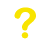
<style>
.page{position:relative;width:50px;height:50px;background:#ffffff}
.page>*{position:absolute;margin:0}
.t1{font:41.5px "ArialRoundedMTBold";color:#f8e400;scale:1.04 1}
</style>
<div class="page">
<p class="t1" style="left:14px;top:7px;width:22px;height:32px">?</p>
</div>
